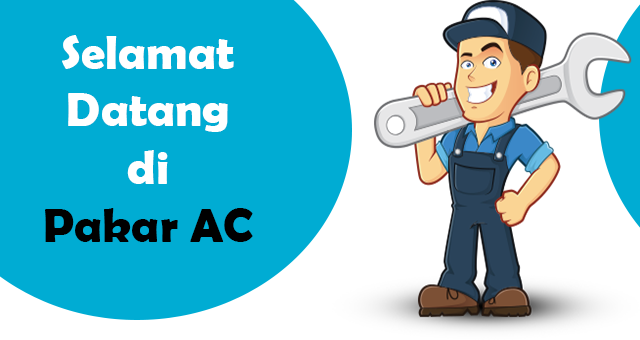
<style>
.page{position:relative;width:640px;height:340px;background:#00acd3}
.page>*{position:absolute;margin:0}
.t1{font:48px "BerlinSansFBDemi-Bold";color:#ffffff}
.t2{font:48px "BerlinSansFBDemi-Bold";color:#000000}
</style>
<div class="page">
<p class="t1" style="left:45px;top:35px;width:208px;height:207px;text-align:center">Selamat Datang <br>di <br><span class="t2">Pakar AC</span></p>
</div>
